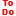
<style>
.page{position:relative;width:16px;height:16px;background:#ffffff}
.page>*{position:absolute;margin:0}
.t1{font:8px "Arial-BoldMT";letter-spacing:0.1em;color:#fe0101;font-weight:bold}
</style>
<div class="page">
<p class="t1" style="left:2px;top:0px;width:12px;height:15px;text-align:center">ToDo</p>
</div>
